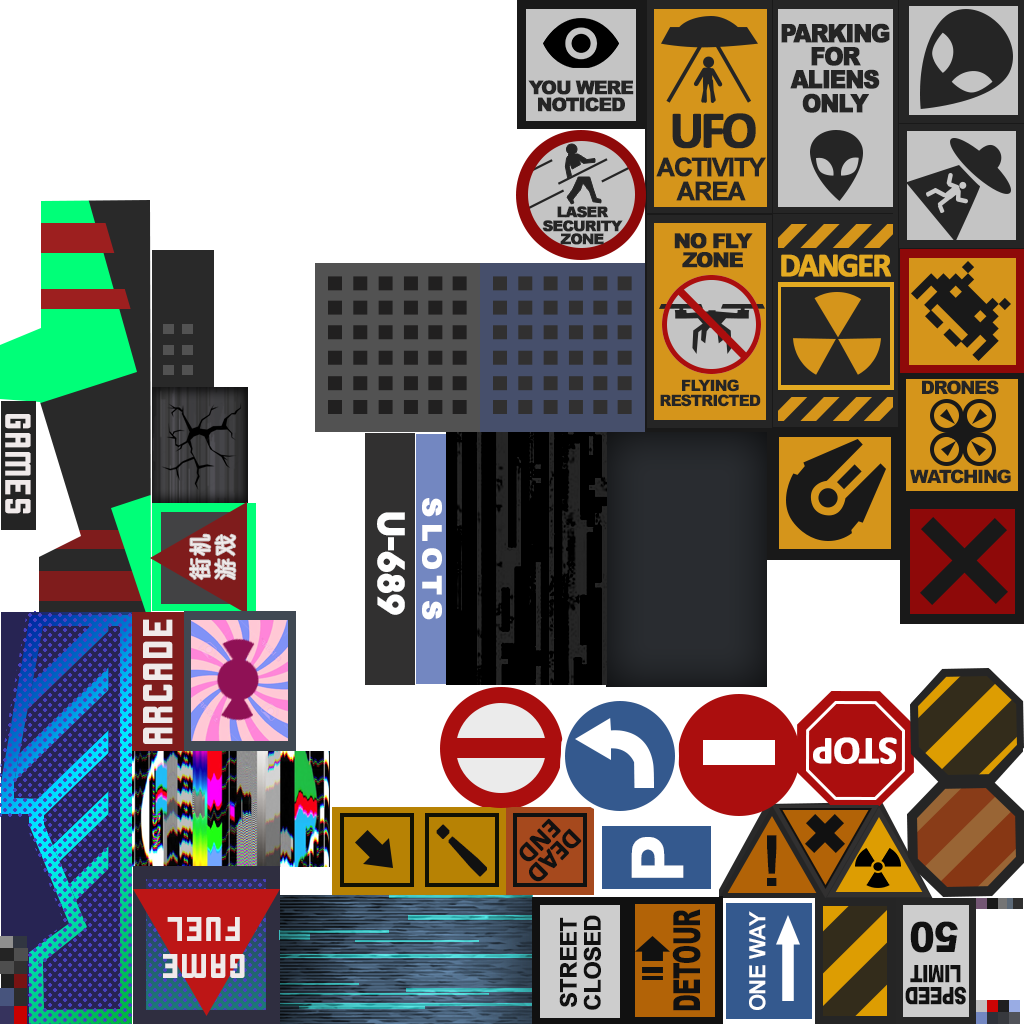
<style>
.page{position:relative;width:1024px;height:1024px;background:#ffffff}
.page>*{position:absolute;margin:0}
.t1{font:25px/23px "Arial-Black";letter-spacing:-0.075em;color:#252525;font-weight:bold;scale:0.92 1}
.t2{font:18.7px/17.3px "Arial-Black";letter-spacing:-0.075em;color:#252525;text-transform:uppercase;font-weight:bold}
.t3{font:52.4px "Calibri-Bold";letter-spacing:-0.075em;color:#252525;font-weight:bold}
.t4{font:25.7px/23.7px "Arial-BoldMT";letter-spacing:-0.075em;color:#252525;font-weight:bold}
.t5{font:14.8px/13.6px "Arial-Black";letter-spacing:-0.075em;color:#252525;text-transform:uppercase;font-weight:bold}
.t6{font:20.7px/19.1px "Arial-Black";letter-spacing:-0.075em;color:#252525;font-weight:bold}
.t7{font:33.7px "Calibri-Bold";letter-spacing:-0.075em;color:#e3aa22;font-weight:bold}
.t8{font:15.8px/14.6px "Arial-Black";letter-spacing:-0.075em;color:#252525;text-transform:uppercase}
.t9{font:18.4px "Arial-Black";letter-spacing:-0.075em;color:#252525;text-transform:uppercase}
.t10{font:35.2px "Cornerstone";color:#f0eaea;scale:0.93 1}
.t11{font:26.6px "Arial-Black";letter-spacing:0.2em;color:#ffffff;text-transform:uppercase;font-weight:bold}
.t12{font:37.8px "Womby-Regular";letter-spacing:-0.01em;color:#fefefe;text-transform:uppercase;font-weight:bold}
.t13{font:22.6px/25.4px "MicrosoftJhengHeiRegular";color:#f0eaea;font-weight:bold}
.t14{font:40.6px "Cornerstone";color:#f0eaea;scale:0.92 1}
.t15{font:39.5px "Calibri-Bold";letter-spacing:-0.025em;color:#ffffff;font-weight:bold}
.t16{font:27.4px/21.2px "Calibri-Bold";letter-spacing:-0.025em;color:#111111;font-weight:bold}
.t17{font:85.6px "ArialMT";letter-spacing:-0.025em;color:#111111;font-weight:bold}
.t18{font:70.5px "Arial-BoldMT";letter-spacing:-0.025em;color:#ffffff;font-weight:bold}
.t19{font:69.3px "ArialMT";letter-spacing:-0.025em;color:#111111;font-weight:bold}
.t20{font:33.3px/37.4px "Cornerstone";color:#f0eaea}
.t21{font:23px/24px "Arial-BoldMT";letter-spacing:-0.025em;color:#111111;font-weight:bold}
.t22{font:37.4px "Arial-Black";letter-spacing:-0.025em;color:#111111;scale:0.61 1}
.t23{font:22.3px "Arial-BoldMT";letter-spacing:-0.025em;color:#ffffff}
.t24{font:41.7px "Arial-Black";letter-spacing:-0.025em;color:#111111;scale:0.92 1}
.t25{font:24.2px/22.3px "Arial-Black";letter-spacing:-0.05em;color:#111111;scale:0.74 1}
</style>
<div class="page">
<p class="t1" style="left:781px;top:23px;width:109px;height:90px;text-align:center">PARKING<br>FOR<br>ALIENS<br>ONLY</p>
<p class="t2" style="left:528px;top:80px;width:106px;height:32px;text-align:center">you were<br>  noticed</p>
<p class="t3" style="left:672px;top:113px;width:84px;height:36px">UFO</p>
<p class="t4" style="left:656px;top:157px;width:110px;height:44px;text-align:center">ACTIVITY<br>AREA</p>
<p class="t5" style="left:542px;top:206px;width:81px;height:39px;text-align:center">LASER<br>security<br>zone</p>
<p class="t6" style="left:674px;top:233px;width:79px;height:35px;text-align:center">NO FLY<br>ZONE</p>
<p class="t7" style="left:781px;top:254px;width:110px;height:23px">DANGER</p>
<p class="t8" style="left:660px;top:379px;width:101px;height:28px;text-align:center">flying<br>restricted</p>
<p class="t9" style="left:922px;top:380px;width:77px;height:15px">DRONES</p>
<p class="t10" style="left:5px;top:414px;width:26px;height:100px;rotate:90deg">GAMES</p>
<p class="t9" style="left:910px;top:469px;width:101px;height:15px">WATCHInG</p>
<p class="t11" style="left:422px;top:498px;width:20px;height:122px;rotate:90deg">slots</p>
<p class="t12" style="left:377px;top:512px;width:28px;height:103px;rotate:90deg">U-689</p>
<p class="t13" style="left:190px;top:534px;width:46px;height:46px;rotate:-90deg">街机<br>游戏</p>
<p class="t14" style="left:143px;top:619px;width:30px;height:125px;rotate:-90deg">ARCADE</p>
<p class="t15" style="left:813px;top:737px;width:84px;height:27px;rotate:180deg">STOP</p>
<p class="t16" style="left:519px;top:818px;width:63px;height:64px;text-align:center;rotate:135deg">DEAD<br>END</p>
<p class="t17" style="left:436px;top:824px;width:51px;height:53px;rotate:135deg">!</p>
<p class="t18" style="left:631px;top:837px;width:53px;height:41px;rotate:-90deg">P</p>
<p class="t19" style="left:767px;top:835px;width:10px;height:51px">!</p>
<p class="t20" style="left:163px;top:917px;width:82px;height:61px;text-align:center;rotate:180deg">Game<br>fuel</p>
<p class="t21" style="left:559px;top:915px;width:42px;height:95px;text-align:center;rotate:-90deg">STREET<br>CLOSED</p>
<p class="t22" style="left:672px;top:909px;width:29px;height:102px;rotate:-90deg">DETOUR</p>
<p class="t23" style="left:749px;top:911px;width:17px;height:99px;rotate:-90deg">ONE WAY</p>
<p class="t24" style="left:910px;top:921px;width:48px;height:32px;rotate:180deg">50</p>
<p class="t25" style="left:905px;top:965px;width:62px;height:40px;text-align:center;rotate:180deg">SPEED<br>LIMIT</p>
</div>
